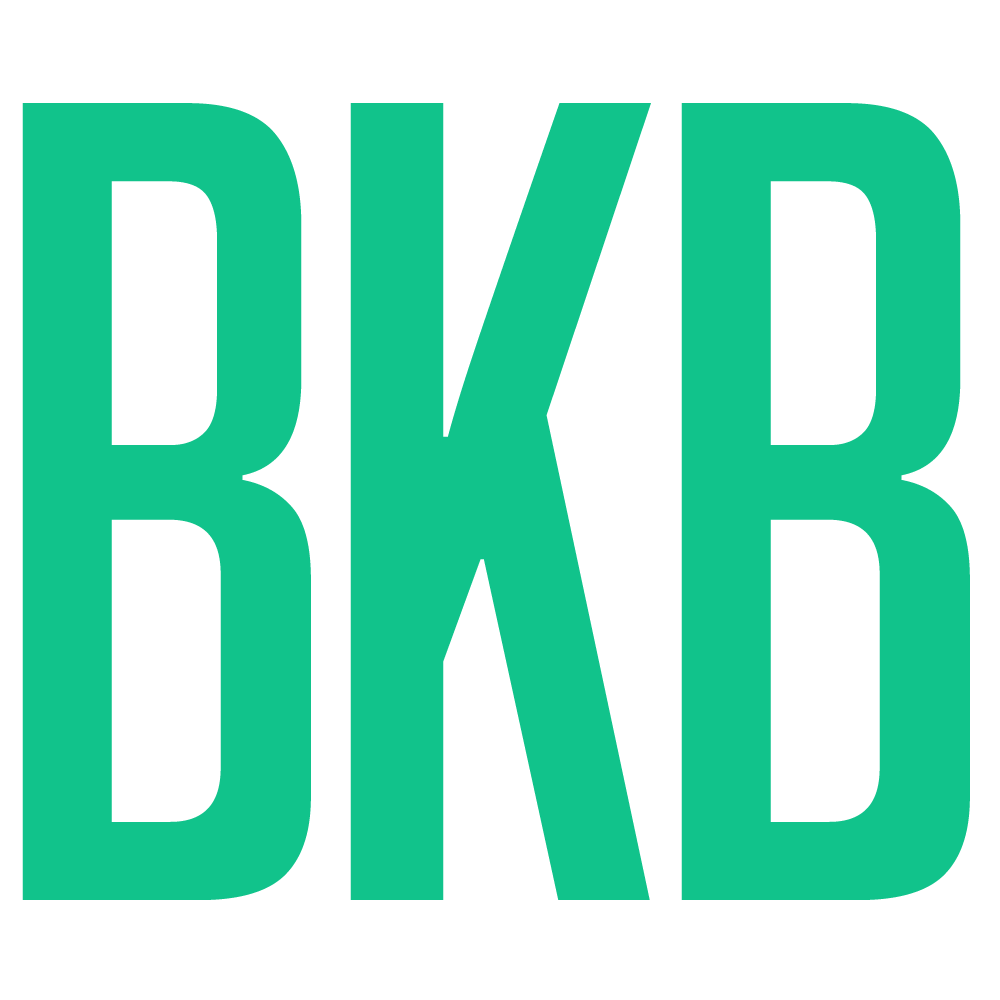
<style>
.page{position:relative;width:1000px;height:1000px;background:#ffffff}
.page>*{position:absolute;margin:0}
.t1{font:1200px "CoolveticaCompressedRg-Regular";color:#11c38b}
</style>
<div class="page">
<p class="t1" style="left:22px;top:103px;width:948px;height:797px">BKB</p>
</div>
